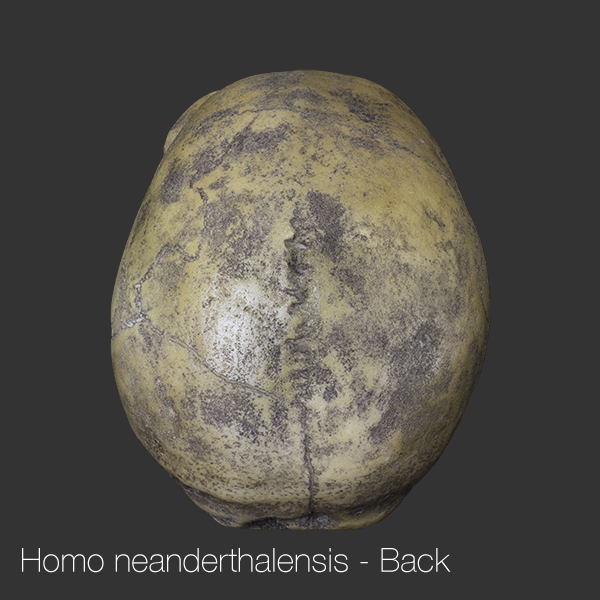
<style>
.page{position:relative;width:600px;height:600px;background:#333333}
.page>*{position:absolute;margin:0}
.t1{font:33.3px "HelveticaNeue-Thin";color:#ffffff}
</style>
<div class="page">
<p class="t1" style="left:22px;top:548px;width:429px;height:25px">Homo neanderthalensis - Back</p>
</div>
